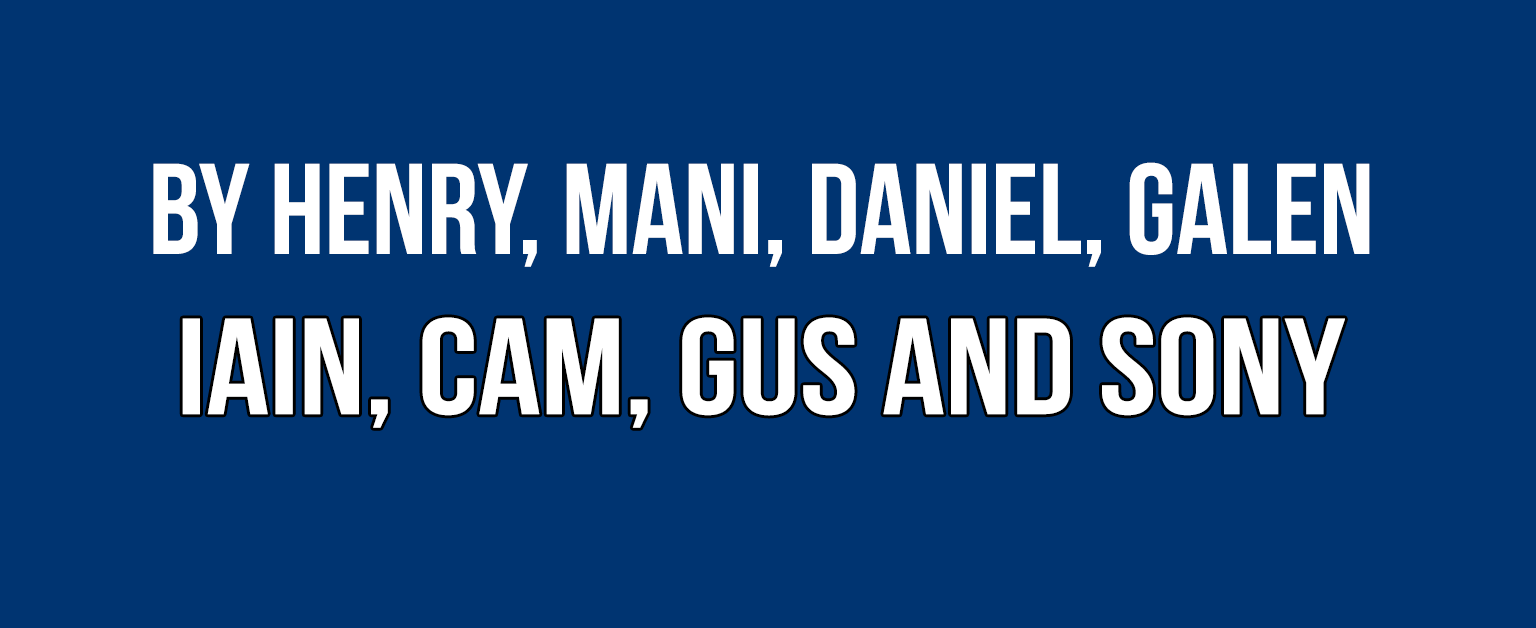
<style>
.page{position:relative;width:1536px;height:628px;background:#003471}
.page>*{position:absolute;margin:0}
.t1{font:128.6px "BebasNeue";color:#ffffff}
.t2{font:136.2px "BebasNeue";color:#ffffff;scale:1.14 1}
</style>
<div class="page">
<p class="t1" style="left:153px;top:162px;width:1217px;height:105px">By Henry, mani, daniel, galen</p>
<p class="t2" style="left:182px;top:317px;width:1163px;height:111px">iain, cam, gus and sony</p>
</div>
